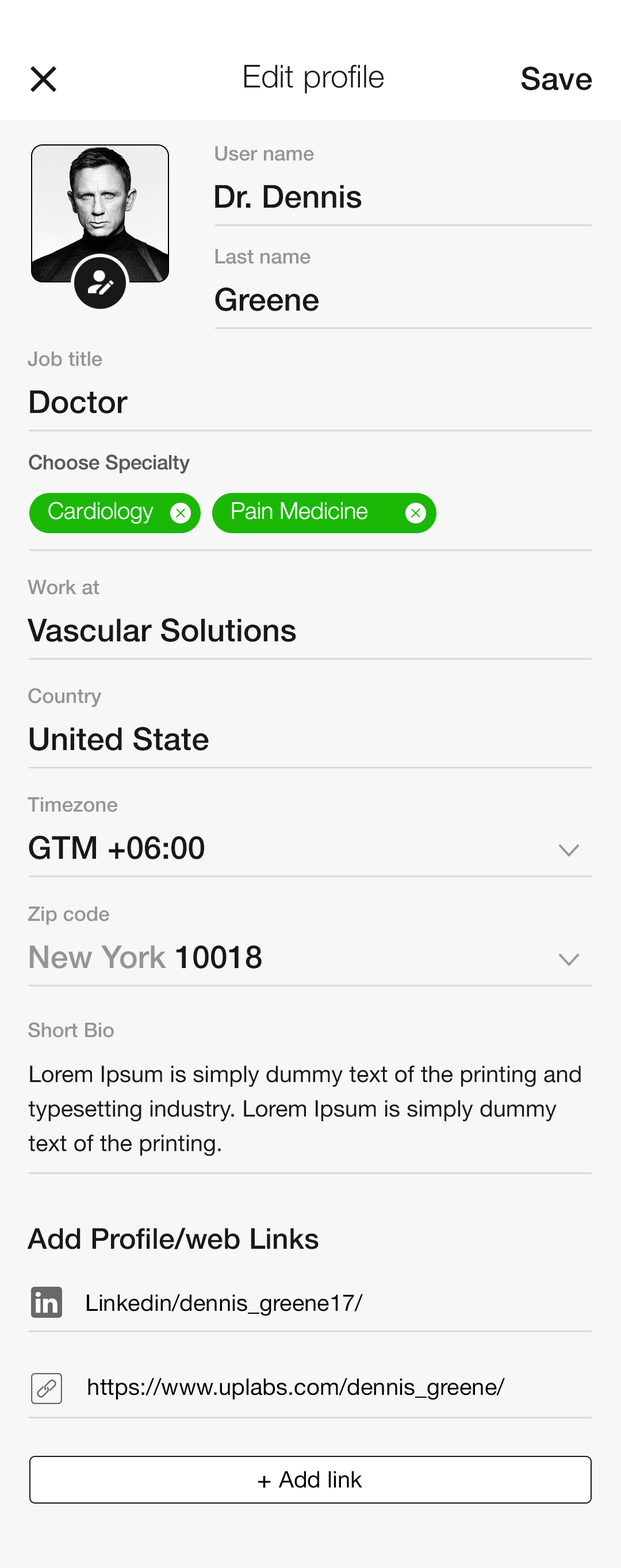
<style>
.page{position:relative;width:621px;height:1568px;background:#f7f7f7}
.page>*{position:absolute;margin:0}
.t1{font:31.6px "HelveticaNeue-Light";color:#181818}
.t2{font:31.6px "HelveticaNeue-Medium";color:#181818}
.t3{font:20.1px "HelveticaNeue-Medium";color:#949598}
.t4{font:20.1px "HelveticaNeue-Medium";color:#595a5c}
.t5{font:23px "HelveticaNeue-Light";color:#ffffff}
.t6{font:31.6px "HelveticaNeue-Medium";color:#949598}
.t7{font:23px/34.5px "HelveticaNeue";color:#181818}
.t8{font:28.8px "HelveticaNeue-Medium";color:#181818}
.t9{font:23px "HelveticaNeue";color:#000000}
.t10{font:23px "HelveticaNeue";color:#000000;font-weight:bold}
</style>
<div class="page">
<p class="t1" style="left:244px;top:64px;width:140px;height:30px">Edit profile</p>
<p class="t2" style="left:521px;top:66px;width:71px;height:24px">Save</p>
<p class="t3" style="left:215px;top:146px;width:99px;height:15px">User name</p>
<p class="t2" style="left:215px;top:185px;width:147px;height:23px">Dr. Dennis</p>
<p class="t3" style="left:215px;top:249px;width:96px;height:15px">Last name</p>
<p class="t2" style="left:215px;top:287px;width:104px;height:24px">Greene</p>
<p class="t3" style="left:28px;top:351px;width:74px;height:15px">Job title</p>
<p class="t2" style="left:30px;top:390px;width:98px;height:24px">Doctor</p>
<p class="t4" style="left:29px;top:454px;width:161px;height:20px">Choose Specialty</p>
<p class="t5" style="left:48px;top:502px;width:106px;height:22px">Cardiology</p>
<p class="t5" style="left:232px;top:502px;width:136px;height:17px">Pain Medicine</p>
<p class="t3" style="left:28px;top:580px;width:72px;height:15px">Work at</p>
<p class="t2" style="left:27px;top:618px;width:269px;height:24px">Vascular Solutions</p>
<p class="t3" style="left:28px;top:688px;width:74px;height:19px">Country</p>
<p class="t2" style="left:29px;top:726px;width:180px;height:25px">United State</p>
<p class="t3" style="left:28px;top:797px;width:89px;height:15px">Timezone</p>
<p class="t2" style="left:29px;top:835px;width:175px;height:24px">GTM +06:00</p>
<p class="t3" style="left:28px;top:907px;width:81px;height:18px">Zip code</p>
<p class="t6" style="left:30px;top:945px;width:232px;height:24px">New York <span class="t2">10018</span></p>
<p class="t3" style="left:28px;top:1022px;width:86px;height:16px">Short Bio</p>
<p class="t7" style="left:28px;top:1065px;width:553px;height:91px">Lorem Ipsum is simply dummy text of the printing and typesetting industry. Lorem Ipsum is simply dummy text of the printing.</p>
<p class="t8" style="left:27px;top:1227px;width:292px;height:22px">Add Profile/web Links</p>
<p class="t9" style="left:87px;top:1294px;width:276px;height:22px">Linkedin/dennis_greene17/</p>
<p class="t9" style="left:88px;top:1378px;width:417px;height:22px">https://www.uplabs.com/dennis_greene/</p>
<p class="t9" style="left:258px;top:1471px;width:104px;height:17px"><span class="t10">+ </span>Add link</p>
</div>
